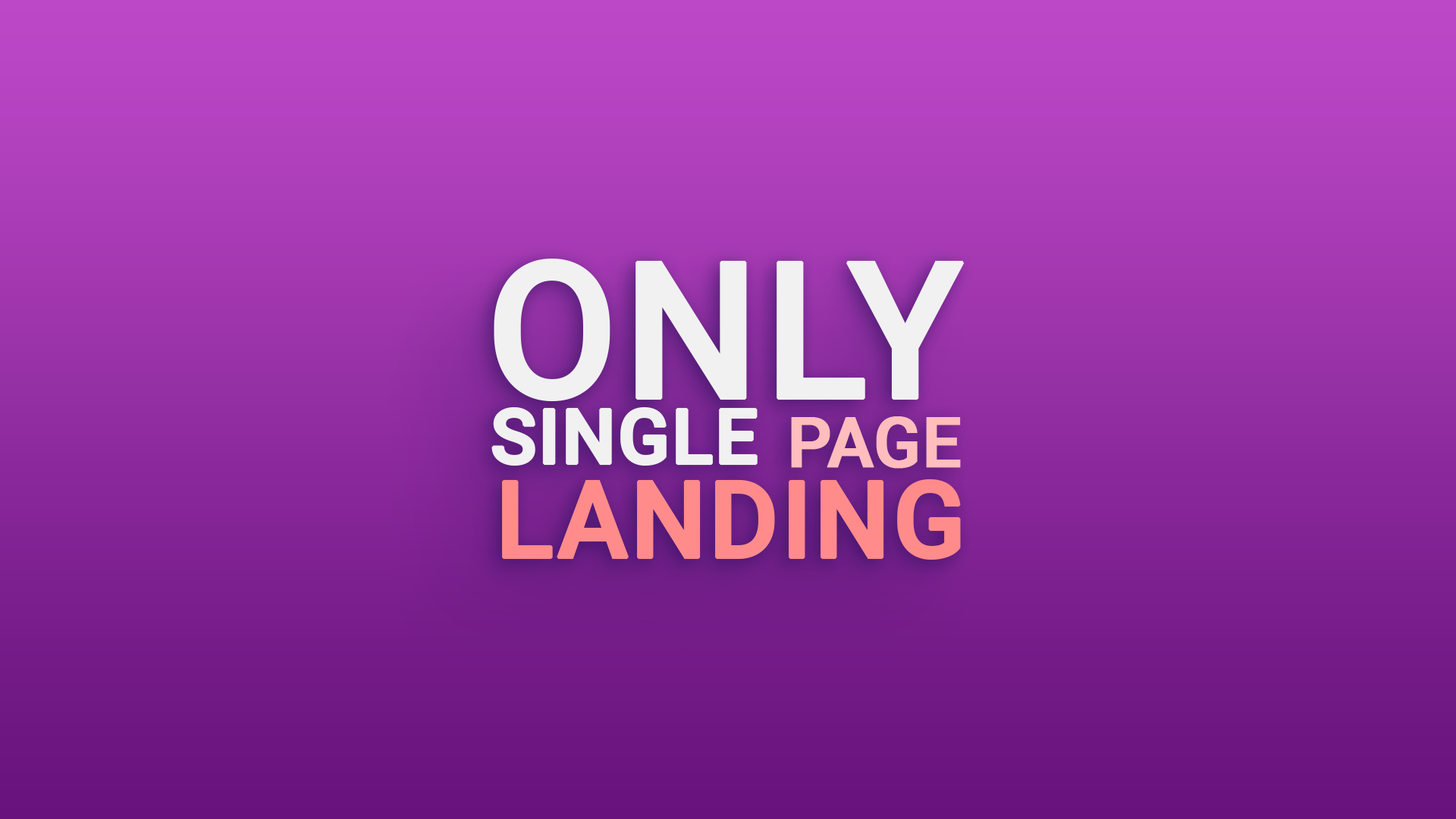
<style>
.page{position:relative;width:1456px;height:819px}
.page>*{position:absolute;margin:0}
.t1{font:191.4px "Roboto-Medium";color:#f1f1f1;font-weight:bold}
.t2{font:76px "Roboto-Medium";color:#f1f1f1;font-weight:bold}
.t3{font:68.7px "Roboto-Medium";color:#ffbdbd;font-weight:bold}
.t4{font:106.5px "Roboto-Medium";color:#ff8b8b;font-weight:bold}
</style>
<div class="page">
<p class="t1" style="left:494px;top:258px;width:471px;height:144px">ONLY</p>
<p class="t2" style="left:491px;top:406px;width:267px;height:60px">SINGLE</p>
<p class="t3" style="left:791px;top:416px;width:170px;height:53px">PAGE</p>
<p class="t4" style="left:502px;top:479px;width:459px;height:81px">LANDING</p>
</div>
